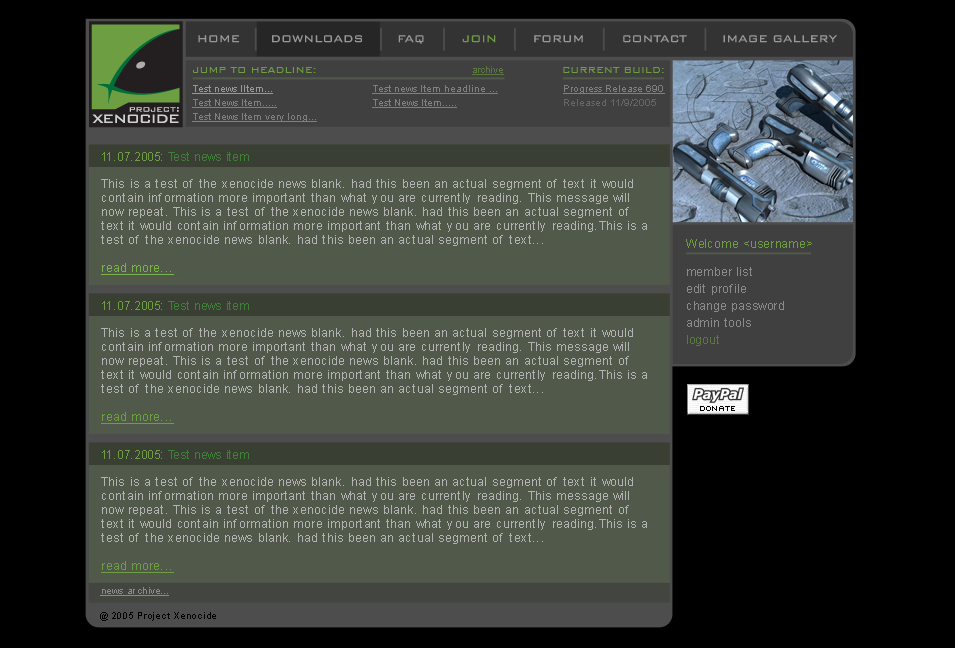
<style>
.page{position:relative;width:955px;height:648px;background:#000000}
.page>*{position:absolute;margin:0}
.t1{font:13px "BankGothicBT-Light";color:#999999}
.t2{font:13px "BankGothicBT-Light";color:#6d9e41}
.t3{font:11px "BankGothicBT-Light";color:#6d9e41}
.t4{font:9px "ArialMT";color:#5b7841;text-decoration:underline}
.t5{font:10px/14px "ArialMT";color:#808080;text-decoration:underline}
.t6{font:10px/14px "ArialMT";color:#999999;text-decoration:underline}
.t7{font:10px/20px "ArialMT";color:#808080;text-decoration:underline}
.t8{font:10px/14px "ArialMT";color:#666666}
.t9{font:12px "ArialMT";color:#3e8038}
.t10{font:12px "ArialMT";color:#6d9e41;text-transform:uppercase}
.t11{font:12px/14px "ArialMT";letter-spacing:0.025em;color:#b3b3b3}
.t12{font:12px/14px "ArialMT";letter-spacing:0.025em;color:#7ab349;text-decoration:underline}
.t13{font:12px/14px "ArialMT";letter-spacing:0.025em;color:#999999}
.t14{font:12px "ArialMT";letter-spacing:0.025em;color:#6d9e41}
.t15{font:12px/17px "ArialMT";letter-spacing:0.025em;color:#8b8b8b}
.t16{font:12px/17px "ArialMT";letter-spacing:0.025em;color:#5b7841}
.t17{font:12px/14px "ArialMT";letter-spacing:0.025em;color:#6d9e41;text-decoration:underline}
.t18{font:10px "ArialMT";letter-spacing:0.025em;color:#8b8b8b;text-decoration:underline}
.t19{font:9px "ArialMT";letter-spacing:0.05em;color:#000000}
</style>
<div class="page">
<p class="t1" style="left:198px;top:35px;width:41px;height:8px">HOME</p>
<p class="t1" style="left:272px;top:35px;width:90px;height:8px">DOWNLOADS</p>
<p class="t1" style="left:398px;top:35px;width:26px;height:9px">FAQ</p>
<p class="t2" style="left:462px;top:35px;width:34px;height:8px">JOIN</p>
<p class="t1" style="left:534px;top:35px;width:49px;height:8px">FORUM</p>
<p class="t1" style="left:623px;top:35px;width:64px;height:8px">CONTACT</p>
<p class="t1" style="left:723px;top:35px;width:114px;height:8px">IMAGE GALLERY</p>
<p class="t3" style="left:193px;top:67px;width:123px;height:6px">JUMP TO HEADLINE:</p>
<p class="t4" style="left:472px;top:66px;width:32px;height:9px">archive</p>
<p class="t3" style="left:563px;top:67px;width:101px;height:6px">CURRENT BUILD:</p>
<p class="t5" style="left:192px;top:85px;width:125px;height:37px"><span class="t6">Test news IItem...<br></span>Test News Item.....<br>Test News Item very long...</p>
<p class="t5" style="left:372px;top:85px;width:126px;height:23px">Test news Item headline ...<br>Test News Item.....</p>
<p class="t7" style="left:563px;top:85px;width:102px;height:21px">Progress Release 690<br><span class="t8">Released 11/9/2005</span></p>
<p class="t9" style="left:102px;top:152px;width:147px;height:9px"><span class="t10">11.07.2005: </span>Test news item</p>
<p class="t11" style="left:101px;top:179px;width:546px;height:96px">This is a test of the xenocide news blank. had this been an actual segment of text it would contain information more important than what you are currently reading. This message will now repeat. This is a test of the xenocide news blank. had this been an actual segment of text it would contain information more important than what you are currently reading.This is a test of the xenocide news blank. had this been an actual segment of text...<br><br><span class="t12">read more...<br><br></span><span class="t13">repeat. This is a test of the xenocide news blank. had this been an actual segment of text it would contain information more important than what you are currently reading. This message will now repeat.</span></p>
<p class="t14" style="left:686px;top:239px;width:126px;height:9px">Welcome &lt;username&gt;</p>
<p class="t15" style="left:687px;top:267px;width:97px;height:79px">member list<br>edit profile<br>change password<br>admin tools<br><span class="t16">logout</span></p>
<p class="t9" style="left:102px;top:301px;width:147px;height:9px"><span class="t10">11.07.2005: </span>Test news item</p>
<p class="t11" style="left:101px;top:328px;width:546px;height:96px">This is a test of the xenocide news blank. had this been an actual segment of text it would contain information more important than what you are currently reading. This message will now repeat. This is a test of the xenocide news blank. had this been an actual segment of text it would contain information more important than what you are currently reading.This is a test of the xenocide news blank. had this been an actual segment of text...<br><br><span class="t17">read more...<br><br></span><span class="t13">repeat. This is a test of the xenocide news blank. had this been an actual segment of text it would contain information more important than what you are currently reading. This message will now repeat.</span></p>
<p class="t9" style="left:102px;top:450px;width:147px;height:9px"><span class="t10">11.07.2005: </span>Test news item</p>
<p class="t11" style="left:101px;top:477px;width:546px;height:96px">This is a test of the xenocide news blank. had this been an actual segment of text it would contain information more important than what you are currently reading. This message will now repeat. This is a test of the xenocide news blank. had this been an actual segment of text it would contain information more important than what you are currently reading.This is a test of the xenocide news blank. had this been an actual segment of text...<br><br><span class="t17">read more...<br><br></span><span class="t13">repeat. This is a test of the xenocide news blank. had this been an actual segment of text it would contain information more important than what you are currently reading. This message will now repeat.</span></p>
<p class="t18" style="left:100px;top:587px;width:69px;height:9px">news archive...</p>
<p class="t19" style="left:100px;top:612px;width:116px;height:9px">@ 2005 Project Xenocide</p>
</div>
